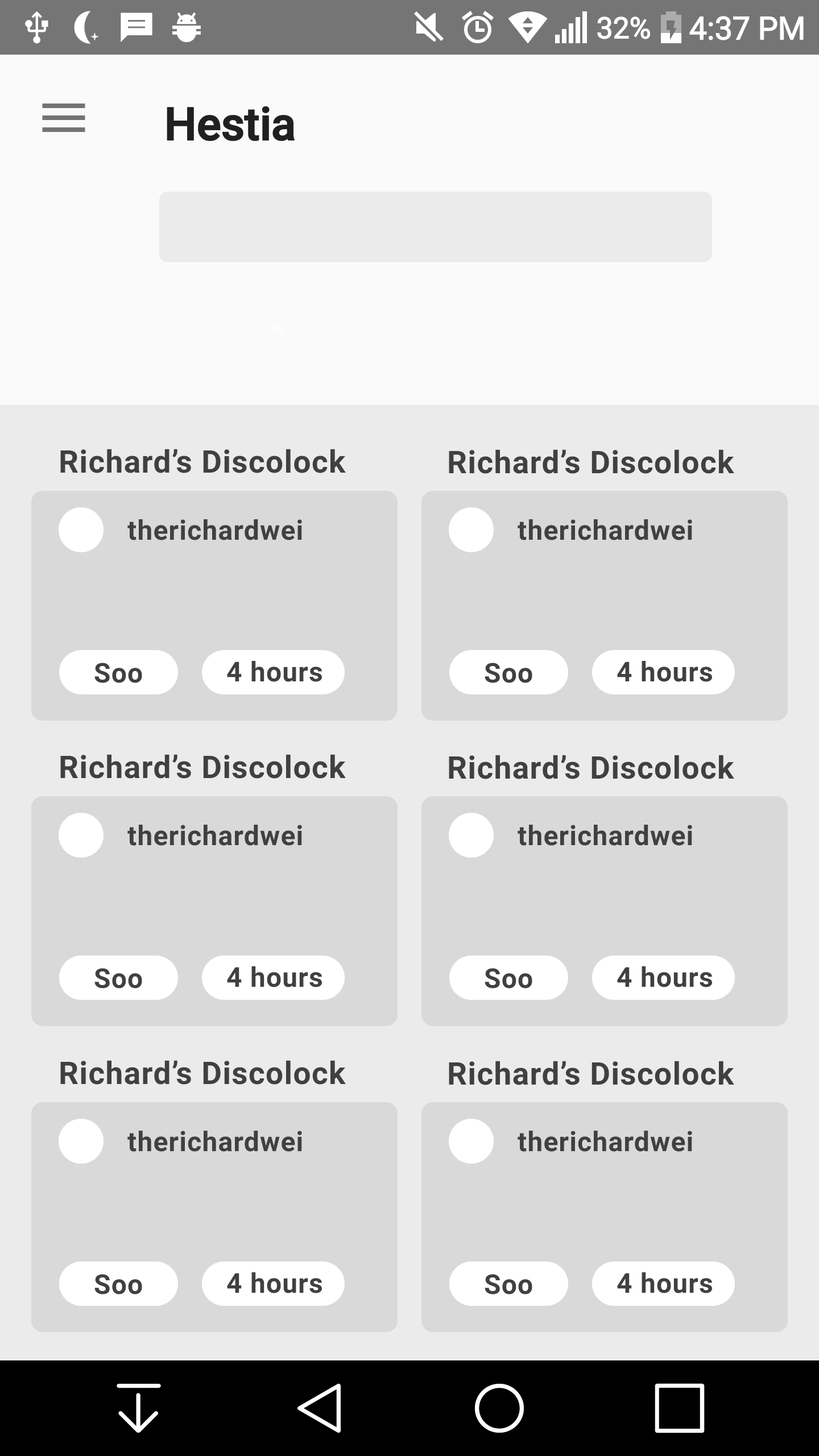
<style>
.page{position:relative;width:819px;height:1456px;background:#d9d9d9}
.page>*{position:absolute;margin:0}
.t1{font:31.3px "Roboto-Bold";letter-spacing:0.025em;color:#404040}
.t2{font:27.3px "Roboto-Bold";letter-spacing:0.025em;color:#404040}
</style>
<div class="page">
<p class="t1" style="left:60px;top:449px;width:286px;height:24px">Richard’s Discolock</p>
<p class="t1" style="left:449px;top:449px;width:285px;height:25px">Richard’s Discolock</p>
<p class="t2" style="left:127px;top:519px;width:175px;height:21px">therichardwei</p>
<p class="t2" style="left:518px;top:519px;width:174px;height:21px">therichardwei</p>
<p class="t2" style="left:94px;top:663px;width:48px;height:20px">Soo</p>
<p class="t2" style="left:227px;top:661px;width:95px;height:21px">4 hours</p>
<p class="t2" style="left:485px;top:663px;width:47px;height:20px">Soo</p>
<p class="t2" style="left:617px;top:661px;width:95px;height:21px">4 hours</p>
<p class="t1" style="left:60px;top:754px;width:286px;height:25px">Richard’s Discolock</p>
<p class="t1" style="left:449px;top:755px;width:285px;height:24px">Richard’s Discolock</p>
<p class="t2" style="left:127px;top:825px;width:175px;height:21px">therichardwei</p>
<p class="t2" style="left:518px;top:825px;width:174px;height:21px">therichardwei</p>
<p class="t2" style="left:94px;top:968px;width:48px;height:20px">Soo</p>
<p class="t2" style="left:227px;top:966px;width:95px;height:21px">4 hours</p>
<p class="t2" style="left:485px;top:968px;width:47px;height:20px">Soo</p>
<p class="t2" style="left:617px;top:966px;width:95px;height:21px">4 hours</p>
<p class="t1" style="left:60px;top:1060px;width:286px;height:25px">Richard’s Discolock</p>
<p class="t1" style="left:449px;top:1061px;width:285px;height:24px">Richard’s Discolock</p>
<p class="t2" style="left:127px;top:1131px;width:175px;height:21px">therichardwei</p>
<p class="t2" style="left:518px;top:1131px;width:174px;height:21px">therichardwei</p>
<p class="t2" style="left:94px;top:1274px;width:48px;height:20px">Soo</p>
<p class="t2" style="left:227px;top:1272px;width:95px;height:21px">4 hours</p>
<p class="t2" style="left:485px;top:1274px;width:47px;height:20px">Soo</p>
<p class="t2" style="left:617px;top:1272px;width:95px;height:21px">4 hours</p>
</div>
